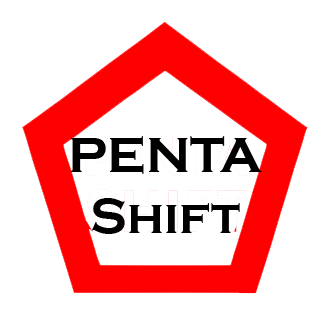
<style>
.page{position:relative;width:330px;height:330px;background:#ffffff}
.page>*{position:absolute;margin:0}
.t1{font:50.9px "CopperplateGothic-Bold";color:#000000}
</style>
<div class="page">
<p class="t1" style="left:71px;top:136px;width:191px;height:98px;text-align:center">PENTA<br>Shift</p>
</div>
